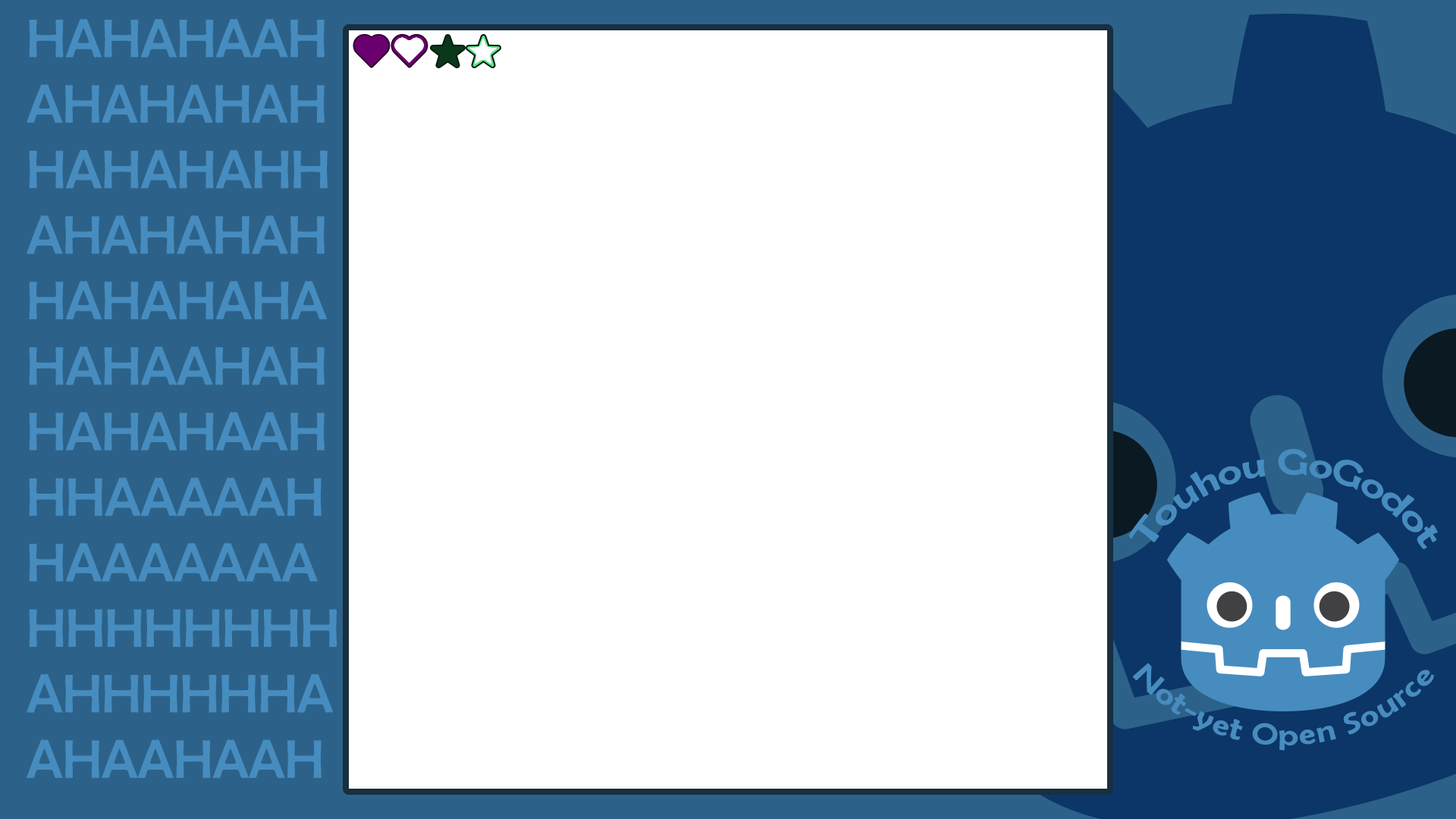
<style>
.page{position:relative;width:1456px;height:819px;background:#ffffff}
.page>*{position:absolute;margin:0}
.t1{font:54.6px "BerlinSansFB-Reg";color:#478cbf}
.t2{font:36.4px "BerlinSansFB-Reg";color:#478cbf}
</style>
<div class="page">
<p class="t1" style="left:27px;top:19px;width:310px;height:759px">HAHAHAAH<br>AHAHAHAH<br>HAHAHAHH<br>AHAHAHAH<br>HAHAHAHA<br>HAHAAHAH<br>HAHAHAAH<br>HHAAAAAH<br>HAAAAAAA<br>HHHHHHHH<br>AHHHHHHA<br>AHAAHAAH</p>
<p class="t2" style="left:1128px;top:449px;width:310px;height:101px">Touhou GoGodot</p>
</div>
